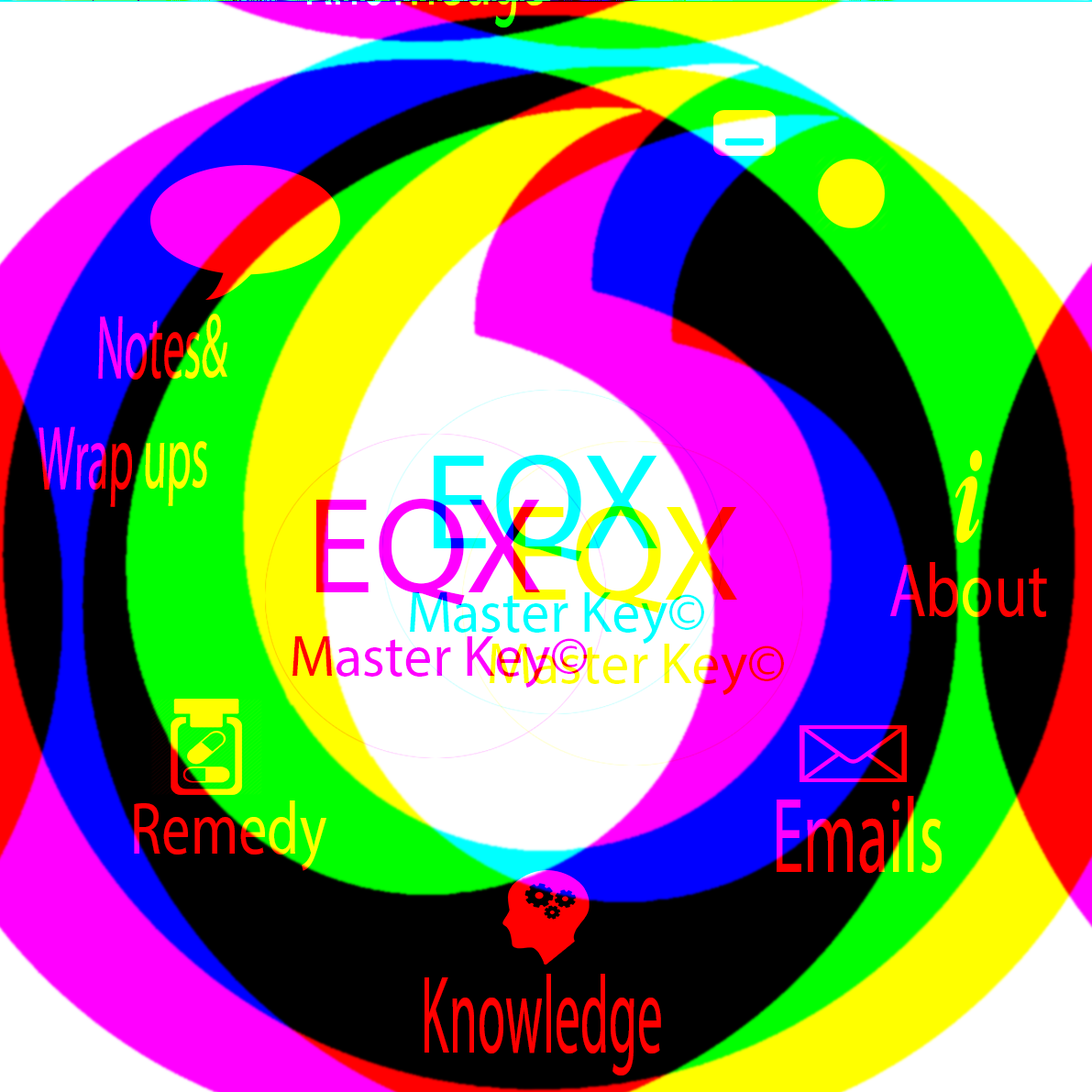
<style>
.page{position:relative;width:1092px;height:1092px;background:#ffffff}
.page>*{position:absolute;margin:0}
.t1{font:91.7px "MyriadPro-Regular";scale:0.47 1}
.t2{font:137.5px "MyriadPro-Regular";color:#00ffff}
.t3{font:76.7px "MyriadPro-Regular";color:#ff0000;scale:0.8 1}
.t4{font:57.3px "MyriadPro-Regular"}
.t5{font:107.8px "MyriadPro-Regular";scale:0.6 1}
.t6{font:74.7px "MyriadPro-Regular";scale:0.77 1}
.t7{font:110.9px "MyriadPro-Regular";color:#ff0000;scale:0.46 1}
</style>
<div class="page">
<p class="t1" style="left:39px;top:312px;width:188px;height:193px;rotate:-1deg">Notes&amp;<br>Wrap ups</p>
<p class="t2" style="left:434px;top:452px;width:223px;height:108px">EQX</p>
<p class="t3" style="left:890px;top:560px;width:157px;height:55px">About</p>
<p class="t4" style="left:410px;top:590px;width:294px;height:52px">Master Key©</p>
<p class="t5" style="left:777px;top:794px;width:165px;height:78px">Emails</p>
<p class="t6" style="left:134px;top:799px;width:192px;height:70px">Remedy</p>
<p class="t7" style="left:425px;top:972px;width:236px;height:102px">Knowledge</p>
</div>
